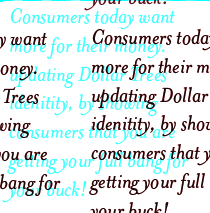
<style>
.page{position:relative;width:210px;height:213px;background:#ffffff}
.page>*{position:absolute;margin:0}
.t1{font:24px "MrsEavesItalic"}
</style>
<div class="page">
<p class="t1" style="left:2px;top:7px;width:187px;height:195px">Consumers today want <br>more for their money. <br>updating Dollar Trees <br>idenitity, by showing <br>consumers that you are <br>getting your full bang for <br>your buck!</p>
</div>
